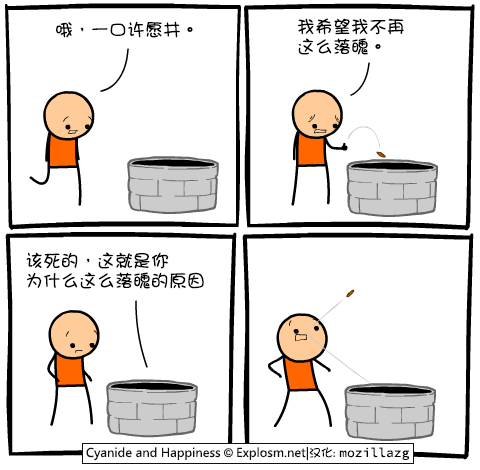
<style>
.page{position:relative;width:480px;height:470px;background:#ffffff}
.page>*{position:absolute;margin:0}
.t1{font:18px "DFGirl";color:#000000}
.t2{font:18px/20px "DFGirl";color:#000000}
</style>
<div class="page">
<p class="t1" style="left:56px;top:21px;width:137px;height:17px">哦，一口许愿井。</p>
<p class="t2" style="left:297px;top:18px;width:107px;height:37px">我希望我不再<br>这么落魄。</p>
<p class="t2" style="left:26px;top:252px;width:178px;height:37px">该死的，这就是你<br>为什么这么落魄的原因</p>
</div>
